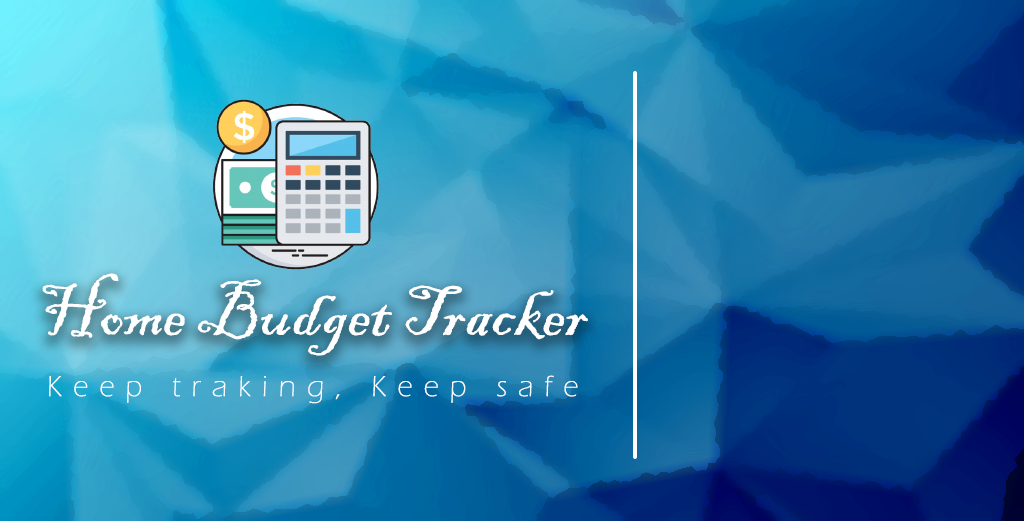
<style>
.page{position:relative;width:1024px;height:521px}
.page>*{position:absolute;margin:0}
.t1{font:73.2px "BlackadderITC-Regular";color:#ffffff}
.t2{font:29.9px "ErasITC-Light";letter-spacing:0.375em;color:#ffffff}
</style>
<div class="page">
<p class="t1" style="left:42px;top:273px;width:546px;height:83px">Home Budget Tracker</p>
<p class="t2" style="left:49px;top:375px;width:529px;height:29px">Keep traking, Keep safe</p>
</div>
